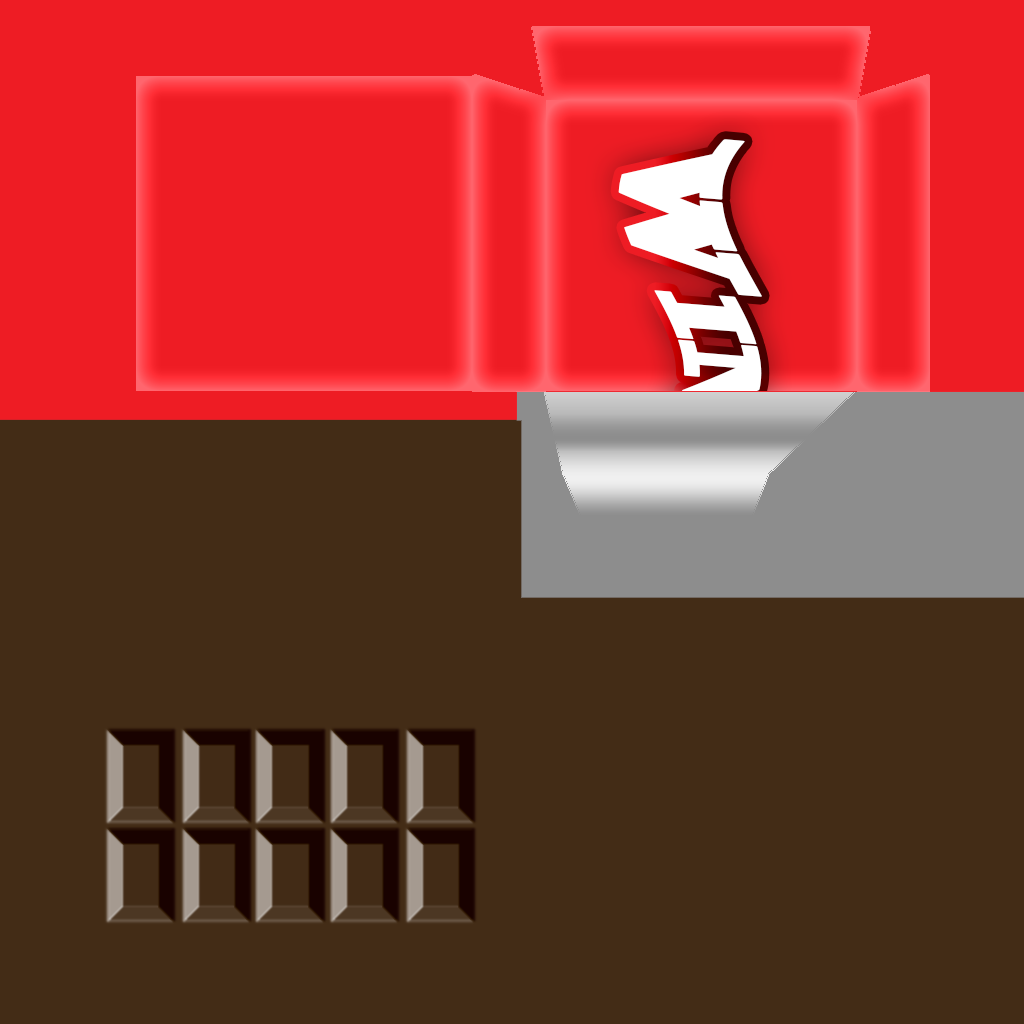
<style>
.page{position:relative;width:1024px;height:1024px;background:#432c16}
.page>*{position:absolute;margin:0}
.t1{font:140.7px "BlackoakStd";color:#ffffff;font-variant:small-caps;font-style:italic;scale:0.48 1}
</style>
<div class="page">
<p class="t1" style="left:618px;top:139px;width:144px;height:300px;rotate:90deg">Win</p>
</div>
